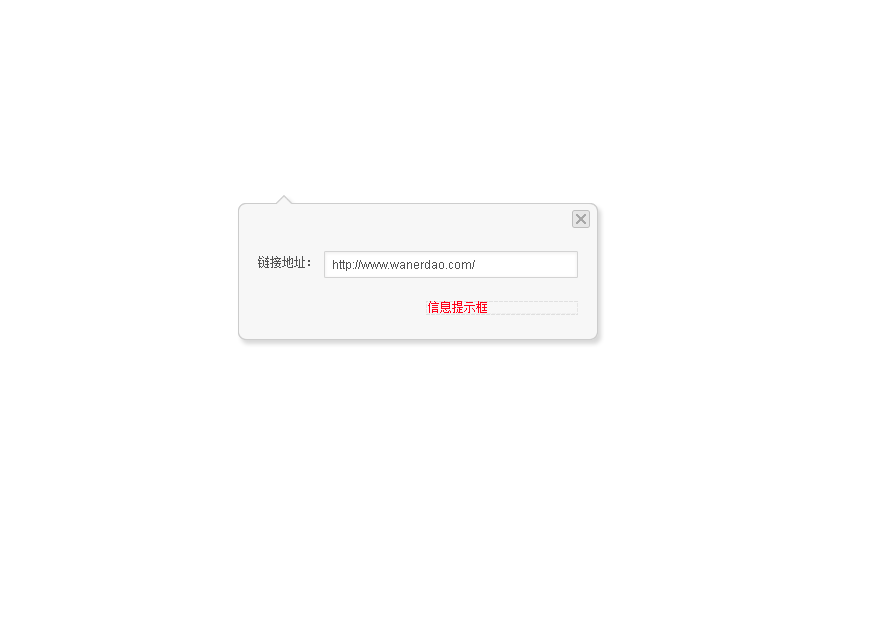
<style>
.page{position:relative;width:885px;height:622px;background:#ffffff}
.page>*{position:absolute;margin:0}
.t1{font:12px "SimSun";color:#525252}
.t2{font:12px "ArialMT";color:#525252}
.t3{font:12px "SimSun";color:#ff0019}
</style>
<div class="page">
<p class="t1" style="left:258px;top:256px;width:52px;height:12px">链接地址：</p>
<p class="t2" style="left:333px;top:260px;width:142px;height:11px">http://www.wanerdao.com/</p>
<p class="t3" style="left:428px;top:301px;width:59px;height:12px">信息提示框</p>
</div>
